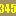
<style>
.page{position:relative;width:16px;height:16px;background:#9f8f63}
.page>*{position:absolute;margin:0}
.t1{font:11.4px "Impact";color:#ffff00}
</style>
<div class="page">
<p class="t1" style="left:0px;top:4px;width:16px;height:9px">345</p>
</div>
